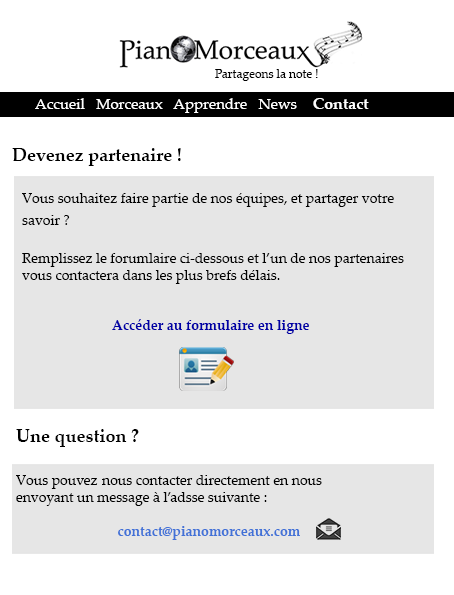
<style>
.page{position:relative;width:454px;height:595px;background:#e6e6e6}
.page>*{position:absolute;margin:0}
.t1{font:12px "PalatinoLinotype-Roman";color:#000000}
.t2{font:15px "PalatinoLinotype-Roman";color:#ffffff}
.t3{font:16px "PalatinoLinotype-Bold";color:#ffffff}
.t4{font:18px "PalatinoLinotype-Bold";color:#000000}
.t5{font:14px "PalatinoLinotype-Roman";color:#000000}
.t6{font:14px "PalatinoLinotype-Bold";color:#0000a5}
.t7{font:14px "PalatinoLinotype-Bold";color:#4272d7}
</style>
<div class="page">
<p class="t1" style="left:215px;top:69px;width:103px;height:12px">Partageons la note !</p>
<p class="t2" style="left:35px;top:98px;width:334px;height:15px">Accueil   Morceaux   Apprendre   News    <span class="t3">Contact</span></p>
<p class="t4" style="left:12px;top:148px;width:169px;height:18px">Devenez partenaire !</p>
<p class="t5" style="left:22px;top:193px;width:382px;height:91px">Vous souhaitez faire partie de nos équipes, et partager votre savoir ? <br><br>Remplissez le forumlaire ci-dessous et l’un de nos partenaires vous contactera dans les plus brefs délais.</p>
<p class="t6" style="left:112px;top:319px;width:197px;height:15px">Accéder au formulaire en ligne</p>
<p class="t5" style="left:16px;top:429px;width:306px;height:111px"><span class="t4">Une question ?<br><br></span>Vous pouvez nous contacter directement en nous envoyant un message à l’adsse suivante : <br><br>                             <span class="t7">contact@pianomorceaux.com</span></p>
</div>
